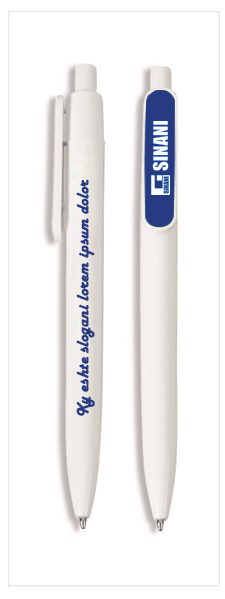
<style>
.page{position:relative;width:225px;height:599px;background:#ffffff}
.page>*{position:absolute;margin:0}
.t1{font:17.1px "HarlowSolid";color:#263b82;font-weight:bold;scale:0.96 1}
</style>
<div class="page">
<p class="t1" style="left:76px;top:179px;width:19px;height:237px;rotate:-90deg">Ky eshte slogani lorem ipsum dolor</p>
</div>
